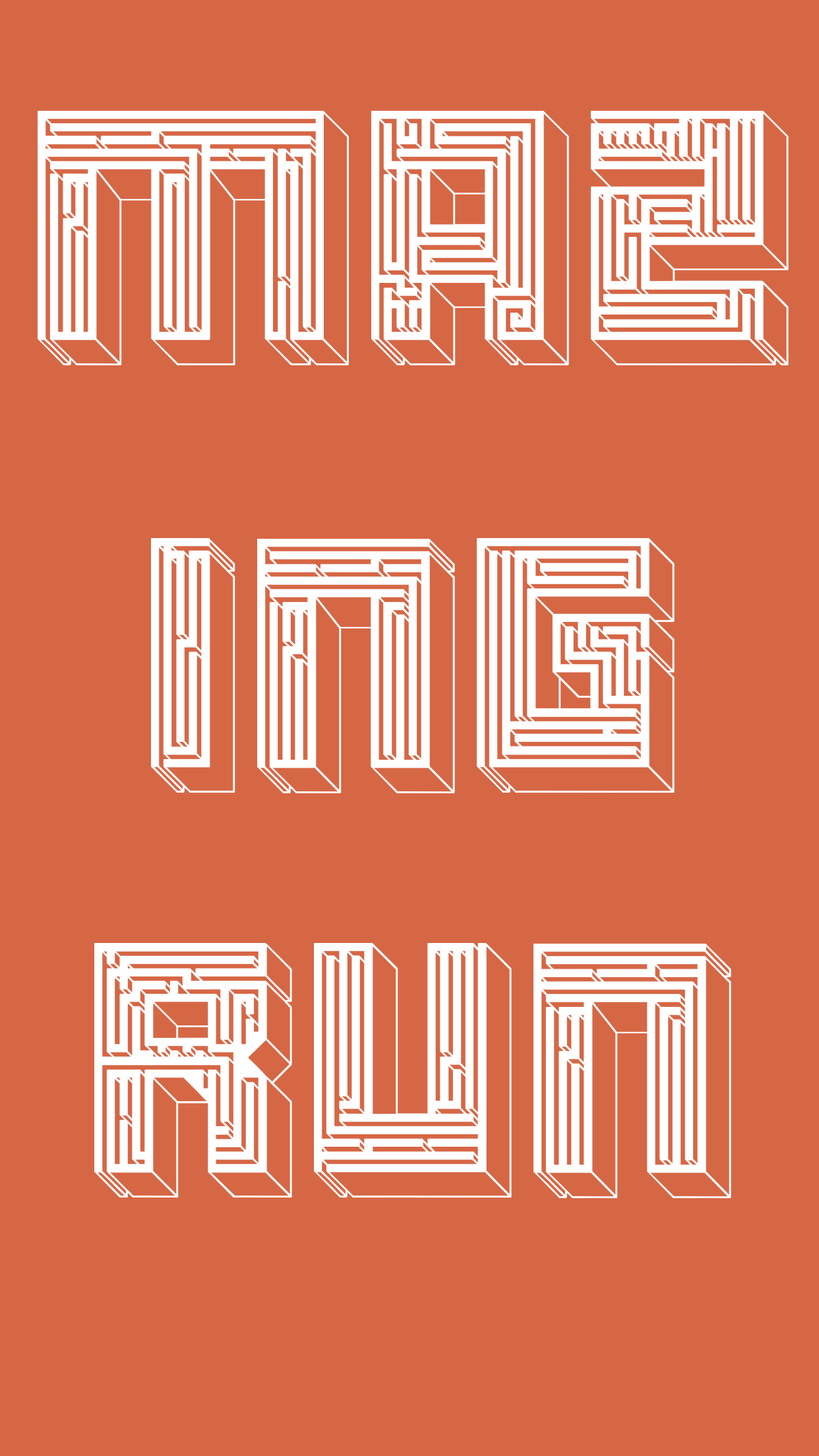
<style>
.page{position:relative;width:819px;height:1456px;background:#d66745}
.page>*{position:absolute;margin:0}
.t1{font:445.8px "Maze-Bold";color:#ffffff}
</style>
<div class="page">
<p class="t1" style="left:38px;top:111px;width:751px;height:254px">maz</p>
<p class="t1" style="left:151px;top:538px;width:524px;height:255px">ing</p>
<p class="t1" style="left:94px;top:943px;width:637px;height:255px">run</p>
</div>
